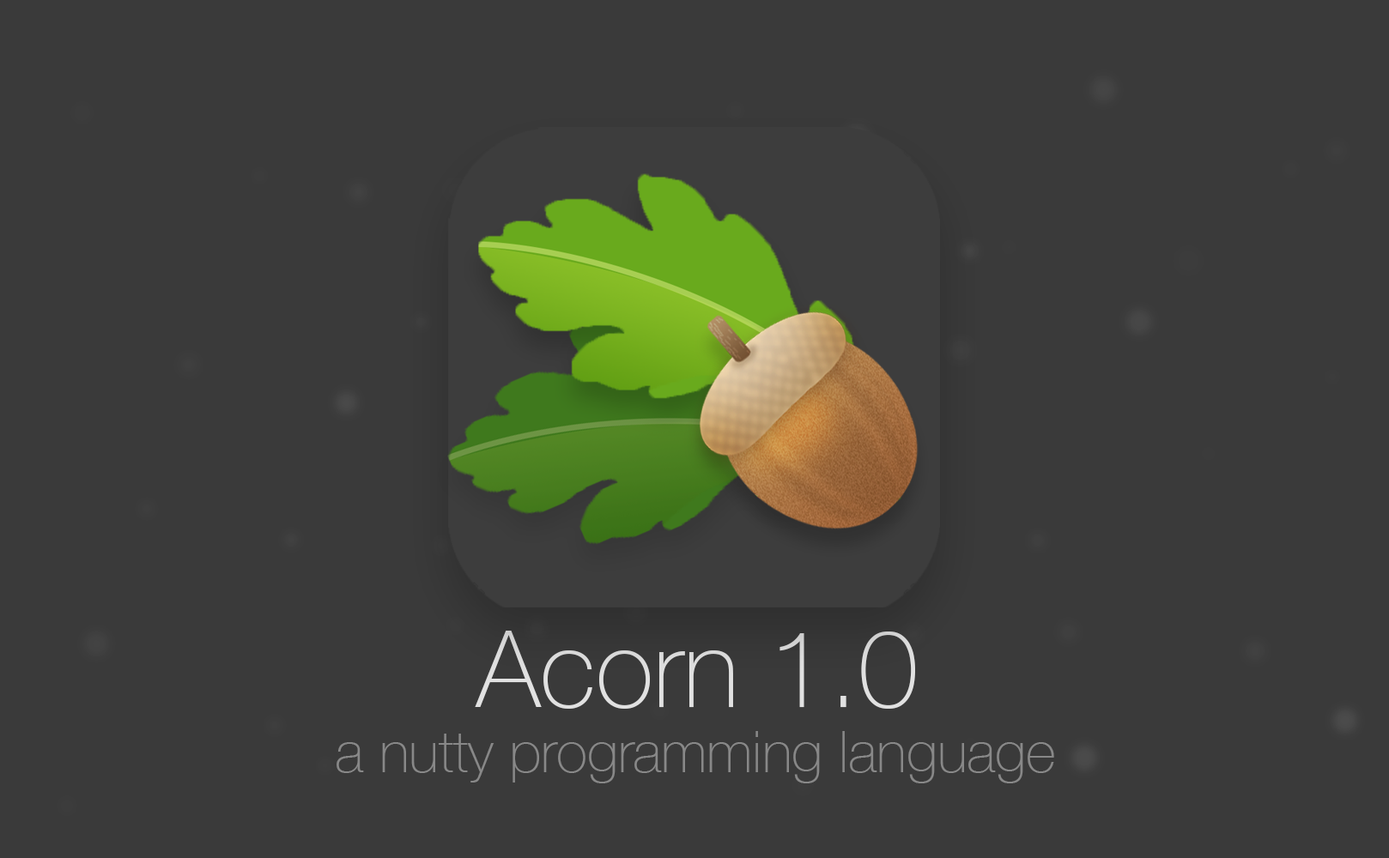
<style>
.page{position:relative;width:1389px;height:858px;background:#3a3a3a}
.page>*{position:absolute;margin:0}
.t1{font:107.3px "HelveticaNeue-Thin";color:#e0e0e0}
.t2{font:57.2px "HelveticaNeue-Thin";color:#888888}
</style>
<div class="page">
<p class="t1" style="left:475px;top:631px;width:440px;height:78px">Acorn 1.0</p>
<p class="t2" style="left:337px;top:731px;width:717px;height:53px">a nutty programming language</p>
</div>
